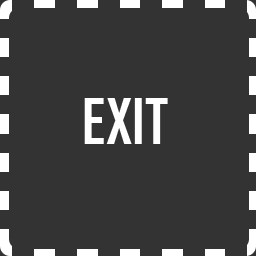
<style>
.page{position:relative;width:256px;height:256px;background:#333333}
.page>*{position:absolute;margin:0}
.t1{font:60px "AgencyFB-Bold";color:#ffffff}
</style>
<div class="page">
<p class="t1" style="left:84px;top:98px;width:84px;height:46px">EXIT</p>
</div>
